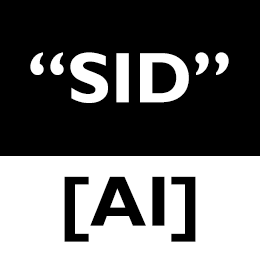
<style>
.page{position:relative;width:260px;height:260px;background:#000000}
.page>*{position:absolute;margin:0}
.t1{font:72px "GillSansMT-Bold";color:#ffffff}
.t2{font:72px "GillSansMT-Bold";color:#000000}
</style>
<div class="page">
<p class="t1" style="left:30px;top:52px;width:199px;height:51px">“SID”</p>
<p class="t2" style="left:64px;top:176px;width:132px;height:66px">[AI]</p>
</div>
